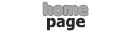
<style>
.page{position:relative;width:130px;height:35px;background:#ffffff}
.page>*{position:absolute;margin:0}
.t1{font:16px "Tahoma-Bold";color:#a8a8a8}
.t2{font:16px "Tahoma-Bold";color:#2a2a2a}
</style>
<div class="page">
<p class="t1" style="left:43px;top:2px;width:45px;height:14px">home</p>
<p class="t2" style="left:47px;top:17px;width:38px;height:14px">page</p>
</div>
